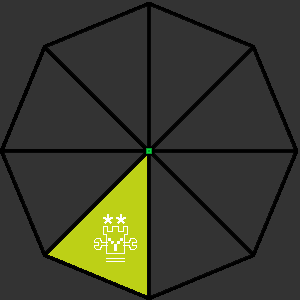
<style>
.page{position:relative;width:300px;height:300px;background:#333333}
.page>*{position:absolute;margin:0}
.t1{font:33.3px "ArialMT";color:#ffffff}
.t2{font:33.3px "VisitorTT2-BRK-";color:#ffffff}
</style>
<div class="page">
<p class="t1" style="left:103px;top:214px;width:23px;height:10px">**</p>
<p class="t2" style="left:108px;top:238px;width:15px;height:13px">y</p>
</div>
